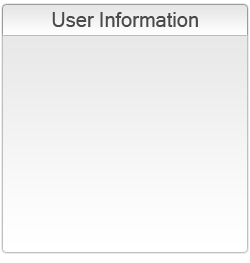
<style>
.page{position:relative;width:250px;height:263px}
.page>*{position:absolute;margin:0}
.t1{font:20px "MicrosoftSansSerif";color:#4a4a4a}
</style>
<div class="page">
<p class="t1" style="left:52px;top:12px;width:146px;height:15px">User Information</p>
</div>
